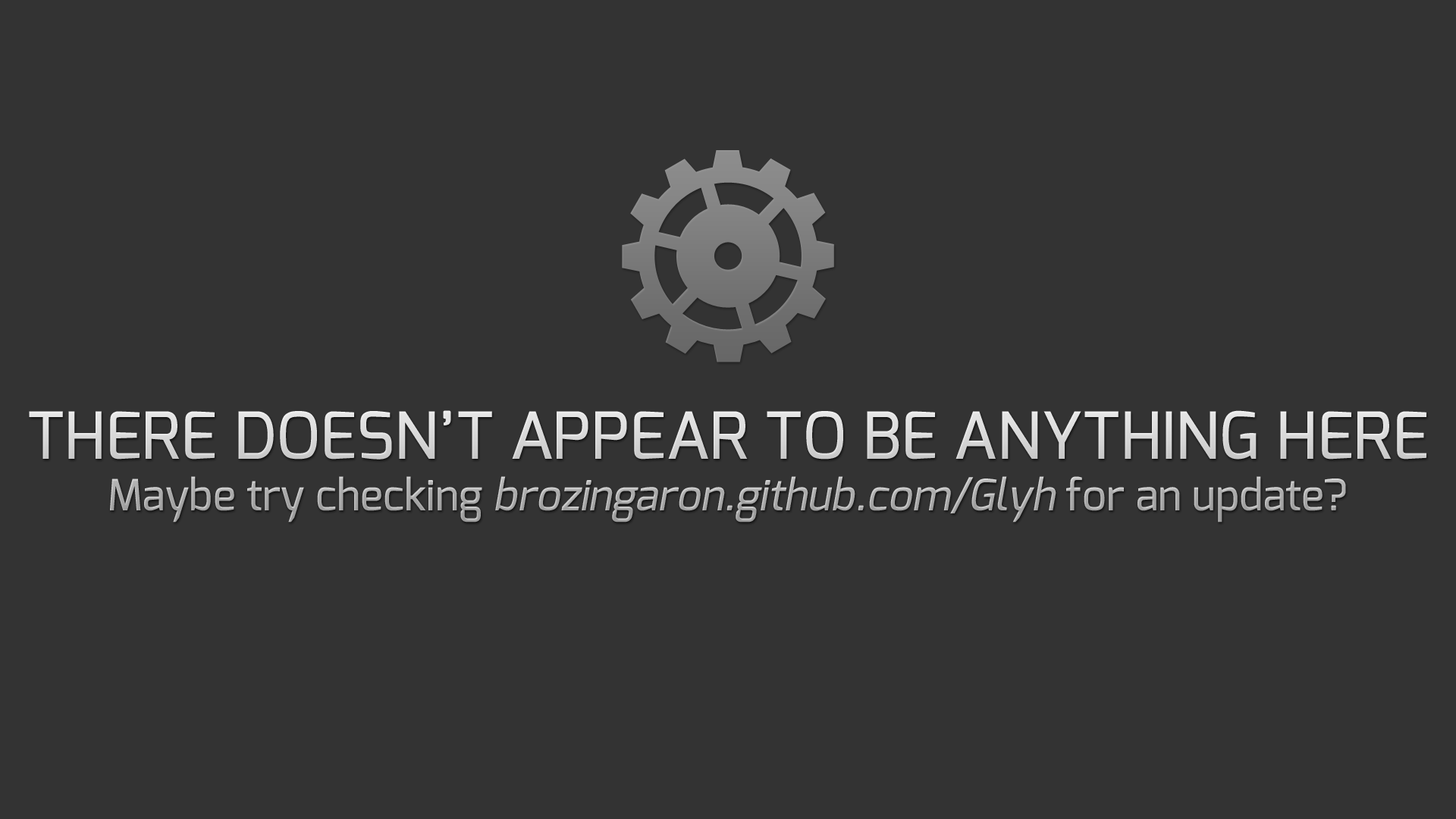
<style>
.page{position:relative;width:1456px;height:819px;background:#333333}
.page>*{position:absolute;margin:0}
.t1{font:64.7px "Exo-Medium";text-transform:uppercase}
.t2{font:43px "Exo-Medium"}
.t3{font:43px "Exo-Medium";font-style:italic}
</style>
<div class="page">
<p class="t1" style="left:29px;top:410px;width:1397px;height:112px;text-align:center">There doesn’t appear to be anything here<br><span class="t2">Maybe try checking </span><span class="t3">brozingaron.github.com/Glyh</span><span class="t2"> for an update?</span></p>
</div>
